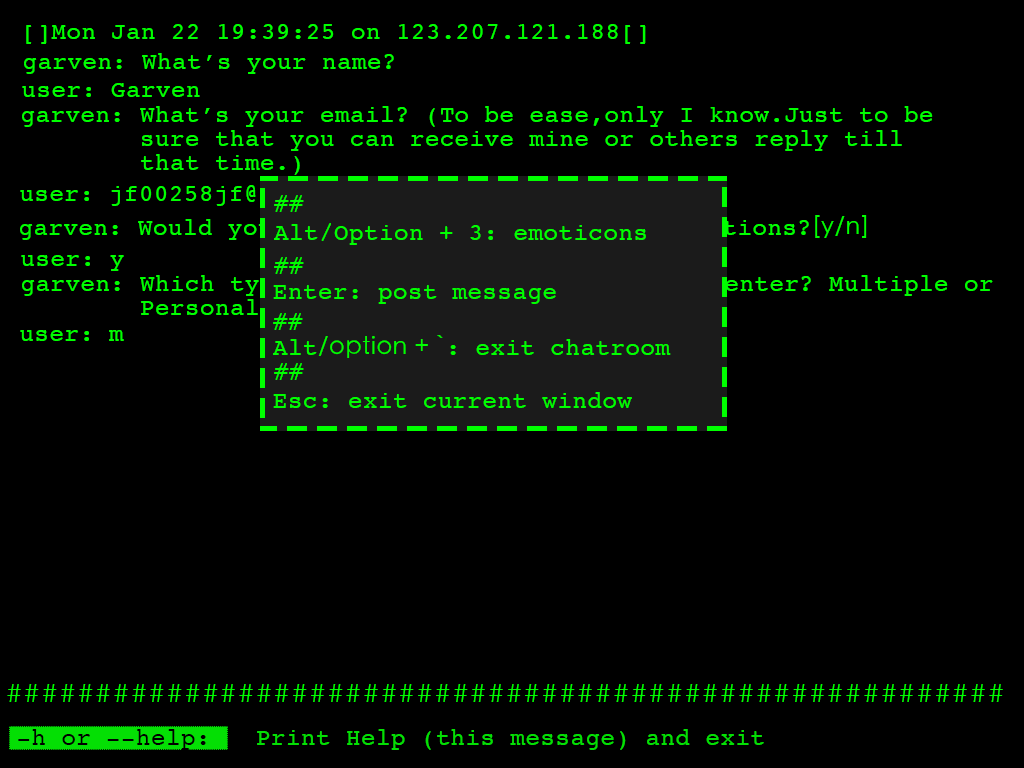
<style>
.page{position:relative;width:1024px;height:768px;background:#000000}
.page>*{position:absolute;margin:0}
.t1{font:24px "Courier";letter-spacing:0.024em;color:#00ff00}
.t2{font:24px/24px "Courier";letter-spacing:0.024em;color:#00ff00}
.t3{font:24px "Courier";letter-spacing:0.024em}
.t4{font:24px "STHeitiSC-Light";letter-spacing:0.024em}
.t5{font:24px "STHeitiSC-Light";letter-spacing:0.024em;color:#00ff00}
.t6{font:24px "Courier";letter-spacing:0.024em;color:#04df04}
.t7{font:24px "Courier";letter-spacing:0.024em;color:#000000}
</style>
<div class="page">
<p class="t1" style="left:26px;top:24px;width:620px;height:20px">[]Mon Jan 22 19:39:25 on 123.207.121.188[]</p>
<p class="t1" style="left:24px;top:53px;width:370px;height:21px">garven: What’s your name?</p>
<p class="t1" style="left:22px;top:83px;width:178px;height:14px">user: Garven</p>
<p class="t2" style="left:22px;top:106px;width:911px;height:69px">garven: What’s your email? (To be ease,only I know.Just to be<br>        sure that you can receive mine or others reply till<br>        that time.)</p>
<p class="t1" style="left:20px;top:185px;width:404px;height:21px">user: jf00258jf@hotmail.com</p>
<p class="t1" style="left:274px;top:195px;width:30px;height:17px">##</p>
<p class="t3" style="left:20px;top:215px;width:847px;height:25px">garven: Would you like to remember above infomations?<span class="t4">[y/n]</span></p>
<p class="t1" style="left:274px;top:223px;width:372px;height:22px">Alt/Option + 3: emoticons</p>
<p class="t1" style="left:21px;top:255px;width:103px;height:16px">user: y</p>
<p class="t1" style="left:274px;top:257px;width:30px;height:17px">##</p>
<p class="t2" style="left:22px;top:275px;width:971px;height:45px">garven: Which type of chatroom would you wanna enter? Multiple or<br>        Personal[m/p]</p>
<p class="t1" style="left:273px;top:285px;width:283px;height:19px">Enter: post message</p>
<p class="t1" style="left:273px;top:313px;width:30px;height:17px">##</p>
<p class="t1" style="left:20px;top:330px;width:104px;height:11px">user: m</p>
<p class="t1" style="left:273px;top:335px;width:398px;height:23px">Alt<span class="t5">/option + `</span>: exit chatroom</p>
<p class="t1" style="left:274px;top:363px;width:30px;height:17px">##</p>
<p class="t1" style="left:273px;top:392px;width:359px;height:16px">Esc: exit current window</p>
<p class="t5" style="left:7px;top:684px;width:996px;height:18px">########################################################</p>
<p class="t6" style="left:18px;top:729px;width:746px;height:21px"><span class="t7">-h or --help:   </span>Print Help (this message) and exit</p>
</div>
